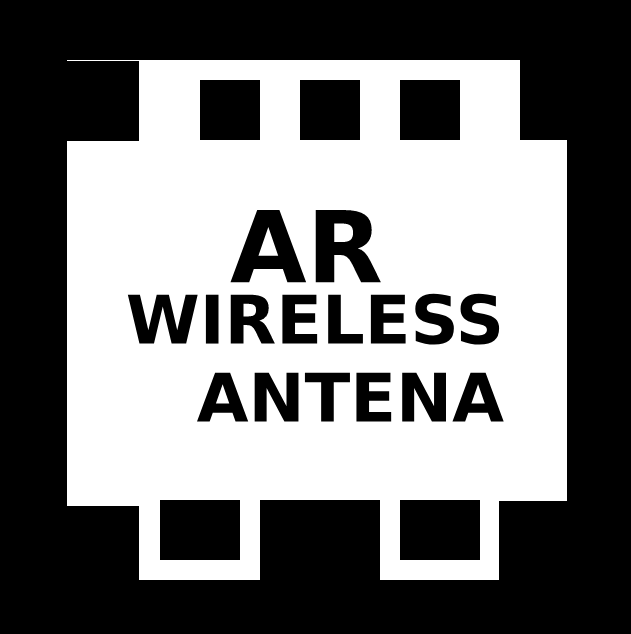
<style>
.page{position:relative;width:631px;height:634px;background:#000000}
.page>*{position:absolute;margin:0}
.t1{font:99px "DejaVuSans-Bold";color:#000000}
.t2{font:67px "DejaVuSans-Bold";color:#000000}
</style>
<div class="page">
<p class="t1" style="left:230px;top:210px;width:151px;height:73px">AR</p>
<p class="t2" style="left:127px;top:293px;width:377px;height:129px;text-align:right">WIRELESS<br>ANTENA</p>
</div>
